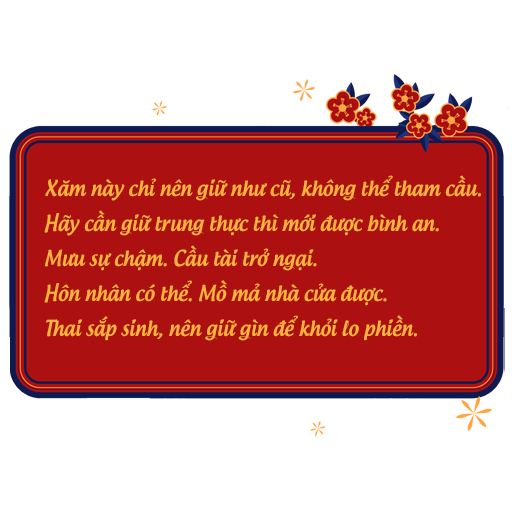
<style>
.page{position:relative;width:512px;height:512px;background:#ffffff}
.page>*{position:absolute;margin:0}
.t1{font:21px/35px "UTM-Androgyne";color:#fdb33e;scale:0.92 1}
</style>
<div class="page">
<p class="t1" style="left:44px;top:175px;width:437px;height:166px">Xăm này chỉ nên giữ như cũ, không thể tham cầu.<br>Hãy cần giữ trung thực thì mới được bình an.<br>Mưu sự chậm. Cầu tài trở ngại. <br>Hôn nhân có thể. Mồ mả nhà cửa được.<br>Thai sắp sinh, nên giữ gìn để khỏi lo phiền.</p>
</div>
